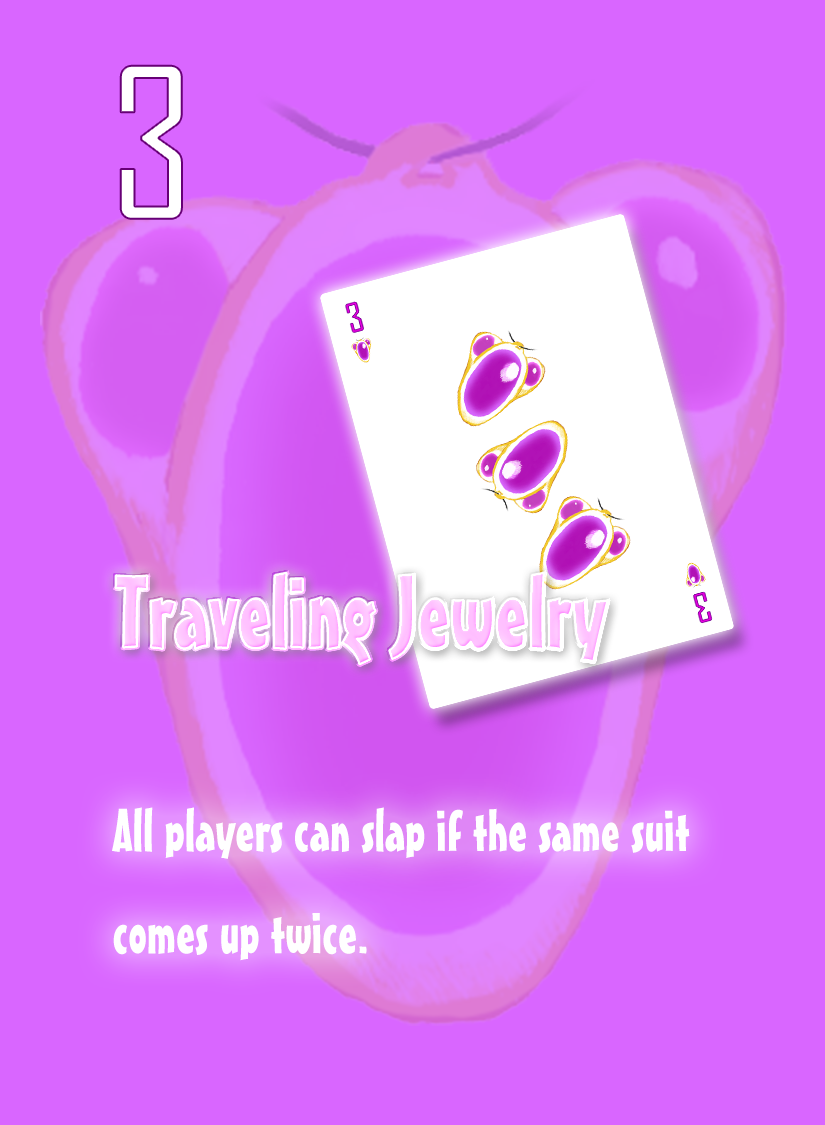
<style>
.page{position:relative;width:825px;height:1125px;background:#d966ff}
.page>*{position:absolute;margin:0}
.t1{font:200px "AgencyFB-Reg";color:#ffffff}
.t2{font:100px "MisterEarlBT-Regular";color:#ffc3ff}
.t3{font:58.3px "MisterEarlBT-Regular";color:#ffffff}
</style>
<div class="page">
<p class="t1" style="left:120px;top:65px;width:62px;height:154px">3</p>
<p class="t2" style="left:115px;top:572px;width:493px;height:92px">Traveling Jewelry</p>
<p class="t3" style="left:112px;top:807px;width:578px;height:154px">All players can slap if the same suit <br>comes up twice.</p>
</div>
